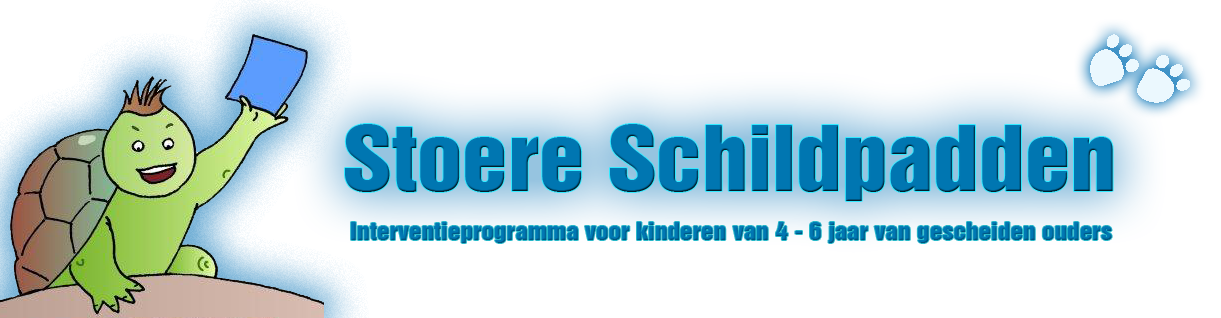
<style>
.page{position:relative;width:1221px;height:318px;background:#ffffff}
.page>*{position:absolute;margin:0}
.t1{font:82.3px "Swiss921BT-RegularA";color:#0076b1;scale:1.13 1}
.t2{font:22.6px "Swiss921BT-RegularA";color:#0077b4;scale:1.13 1}
</style>
<div class="page">
<p class="t1" style="left:345px;top:124px;width:768px;height:77px">Stoere Schildpadden</p>
<p class="t2" style="left:351px;top:222px;width:761px;height:21px">Interventieprogramma voor kinderen van 4 - 6 jaar van gescheiden ouders</p>
</div>
